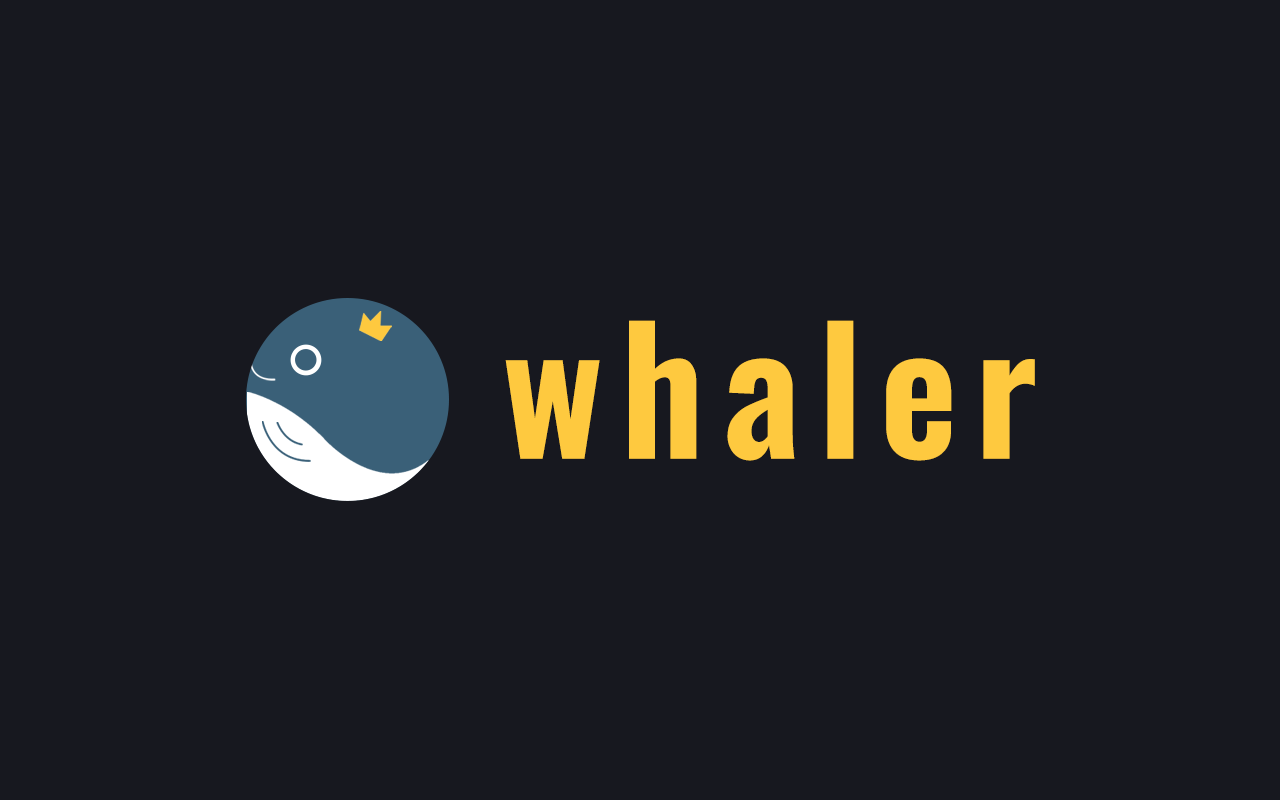
<style>
.page{position:relative;width:1280px;height:800px;background:#17181f}
.page>*{position:absolute;margin:0}
.t1{font:170px "Oswald-SemiBold";letter-spacing:0.1em;color:#fec93f}
</style>
<div class="page">
<p class="t1" style="left:505px;top:320px;width:530px;height:141px">whaler</p>
</div>
